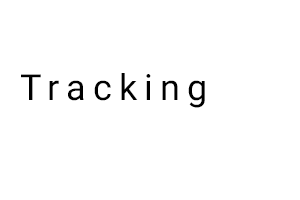
<style>
.page{position:relative;width:300px;height:200px;background:#ffffff}
.page>*{position:absolute;margin:0}
.t1{font:36px "Roboto-Regular";letter-spacing:0.2em;color:#000000}
</style>
<div class="page">
<p class="t1" style="left:21px;top:73px;width:184px;height:35px">Tracking</p>
</div>
